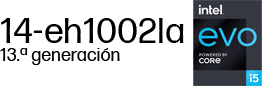
<style>
.page{position:relative;width:262px;height:86px;background:#ffffff}
.page>*{position:absolute;margin:0}
.t1{font:36px "FormaDJRMicro-Regular";color:#000000}
.t2{font:18px "FormaDJRMicro-Regular";color:#000000}
</style>
<div class="page">
<p class="t1" style="left:1px;top:18px;width:183px;height:25px">14-eh1002la</p>
<p class="t2" style="left:0px;top:48px;width:120px;height:17px">13.ª generación</p>
</div>
